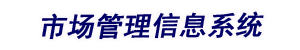
<style>
.page{position:relative;width:300px;height:50px;background:#ffffff}
.page>*{position:absolute;margin:0}
.t1{font:27px "SimHei";letter-spacing:0.01em;color:#000066;font-weight:bold;font-style:italic}
</style>
<div class="page">
<p class="t1" style="left:42px;top:11px;width:222px;height:29px;rotate:-1deg">市场管理信息系统</p>
</div>
